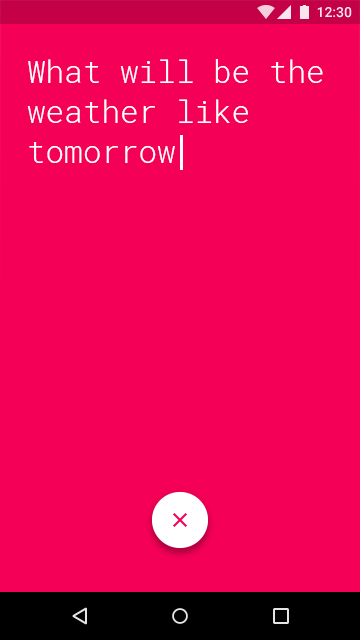
<style>
.page{position:relative;width:360px;height:640px;background:#f50057}
.page>*{position:absolute;margin:0}
.t1{font:31px/40px "RobotoMono-Light";color:#ffffff}
</style>
<div class="page">
<p class="t1" style="left:27px;top:59px;width:296px;height:104px">What will be the weather like tomorrow</p>
</div>
